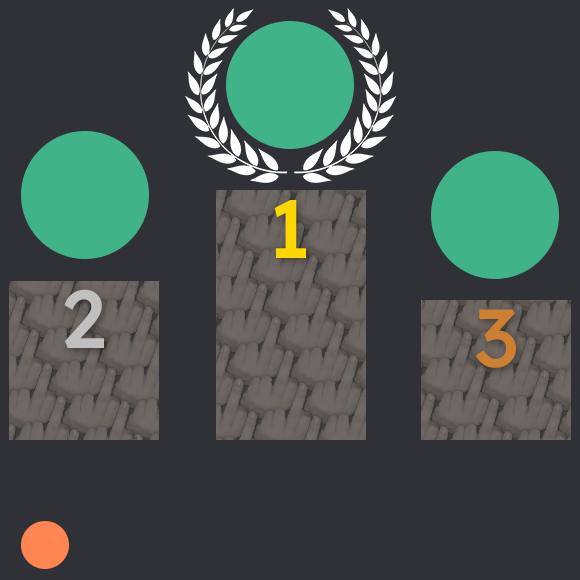
<style>
.page{position:relative;width:580px;height:580px;background:#2f3136}
.page>*{position:absolute;margin:0}
.t1{font:81.8px "ReadexPro-Medium";color:#ffd700}
.t2{font:81.8px "ReadexPro-Medium";color:#c0c0c0}
.t3{font:81.8px "ReadexPro-Medium";color:#cd7f32}
</style>
<div class="page">
<p class="t1" style="left:274px;top:200px;width:32px;height:58px">1</p>
<p class="t2" style="left:64px;top:289px;width:40px;height:59px">2</p>
<p class="t3" style="left:475px;top:309px;width:41px;height:59px">3</p>
</div>
